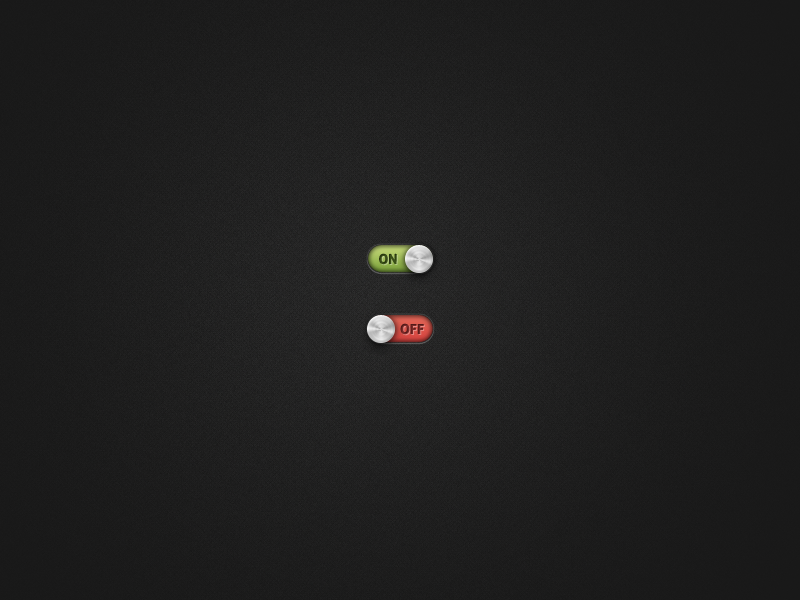
<style>
.page{position:relative;width:800px;height:600px}
.page>*{position:absolute;margin:0}
.t1{font:14px "AllerDisplay";color:#3a5017}
.t2{font:14px "AllerDisplay";color:#7a2927}
</style>
<div class="page">
<p class="t1" style="left:379px;top:253px;width:18px;height:12px">ON</p>
<p class="t2" style="left:400px;top:323px;width:24px;height:12px">OFF</p>
</div>
